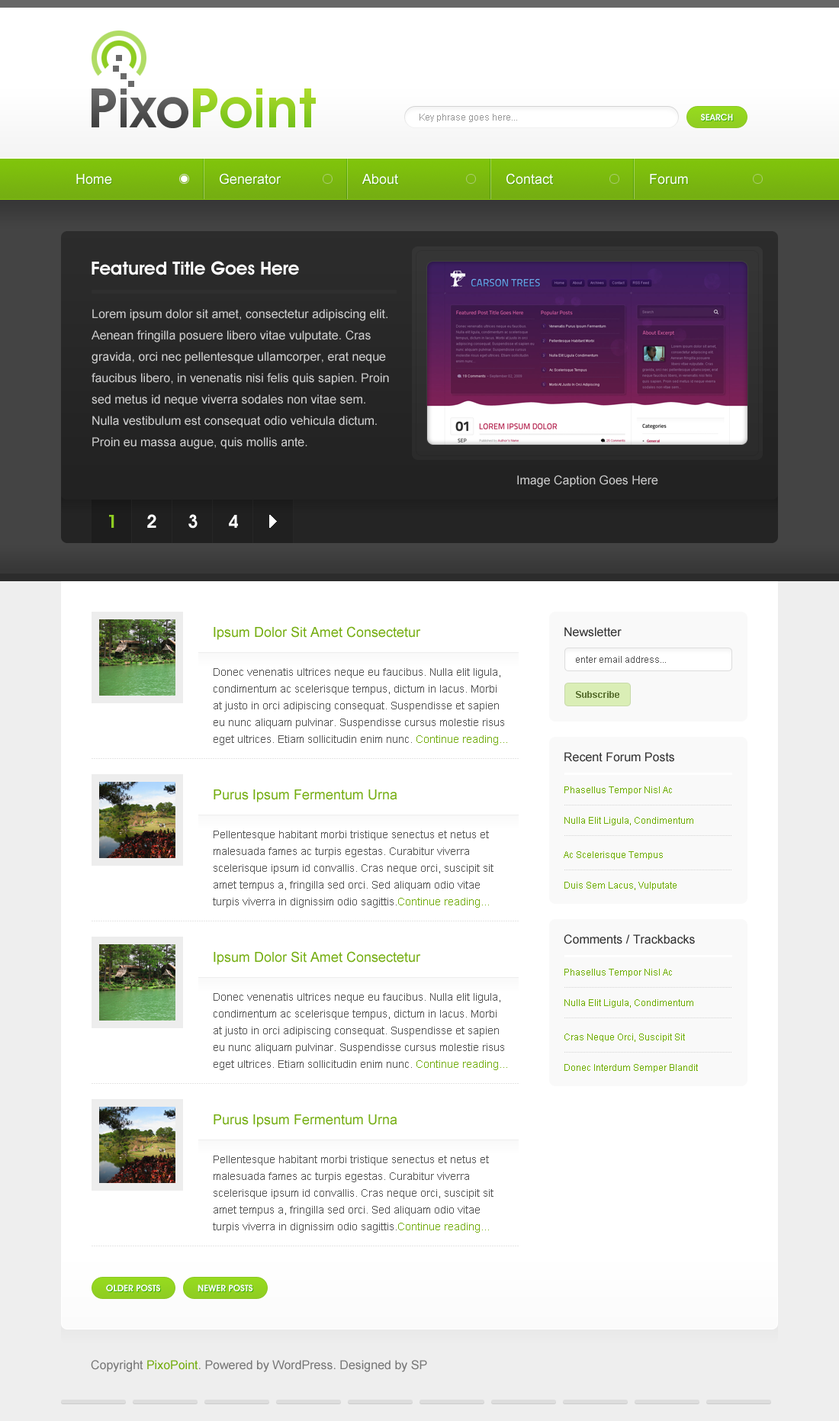
<style>
.page{position:relative;width:839px;height:1421px;background:#ffffff}
.page>*{position:absolute;margin:0}
.t1{font:9.2px "ArialMT";color:#999999}
.t2{font:9.2px "AvantGardeITCbyBT-Demi";color:#f9f9f9;text-transform:uppercase}
.t3{font:13.7px "ArialMT";color:#ffffff}
.t4{font:18.3px "AvantGardeITCbyBT-Demi";color:#ffffff}
.t5{font:12.2px/21.4px "ArialMT";color:#cccccc}
.t6{font:12.2px "ArialMT";color:#cccccc}
.t7{font:18.3px "AvantGardeITCbyBT-Demi";color:#8fcd22}
.t8{font:13.7px "ArialMT";color:#74ad10}
.t9{font:12.2px "ArialMT";color:#333333}
.t10{font:9.2px "ArialMT";color:#555555}
.t11{font:10.7px/16.8px "ArialMT";color:#555555}
.t12{font:10.7px/16.8px "ArialMT";color:#74ad10}
.t13{font:9.2px "Arial-BoldMT";color:#627939}
.t14{font:9.2px "ArialMT";color:#6ead00}
.t15{font:12.2px "ArialMT";color:#777777}
.t16{font:12.2px "ArialMT";color:#74ad10}
</style>
<div class="page">
<p class="t1" style="left:420px;top:114px;width:97px;height:8px">Key phrase goes here...</p>
<p class="t2" style="left:701px;top:114px;width:32px;height:7px">Search</p>
<p class="t3" style="left:76px;top:174px;width:36px;height:11px">Home</p>
<p class="t3" style="left:220px;top:173px;width:61px;height:12px">Generator</p>
<p class="t3" style="left:362px;top:174px;width:36px;height:11px">About</p>
<p class="t3" style="left:507px;top:173px;width:46px;height:12px">Contact</p>
<p class="t3" style="left:650px;top:174px;width:38px;height:11px">Forum</p>
<p class="t4" style="left:92px;top:261px;width:207px;height:14px">Featured Title Goes Here</p>
<p class="t5" style="left:92px;top:309px;width:297px;height:140px">Lorem ipsum dolor sit amet, consectetur adipiscing elit.<br>Aenean fringilla posuere libero vitae vulputate. Cras<br>gravida, orci nec pellentesque ullamcorper, erat neque<br>faucibus libero, in venenatis nisi felis quis sapien. Proin<br>sed metus id neque viverra sodales non vitae sem.<br>Nulla vestibulum est consequat odio vehicula dictum.<br>Proin eu massa augue, quis mollis ante.</p>
<p class="t6" style="left:517px;top:475px;width:141px;height:12px">Image Caption Goes Here</p>
<p class="t7" style="left:109px;top:515px;width:5px;height:13px">1</p>
<p class="t4" style="left:147px;top:514px;width:9px;height:14px">2</p>
<p class="t4" style="left:188px;top:514px;width:10px;height:15px">3</p>
<p class="t4" style="left:229px;top:515px;width:9px;height:13px">4</p>
<p class="t8" style="left:214px;top:626px;width:207px;height:14px">Ipsum Dolor Sit Amet Consectetur</p>
<p class="t9" style="left:564px;top:627px;width:58px;height:10px">Newsletter</p>
<p class="t10" style="left:576px;top:656px;width:90px;height:7px">enter email address...</p>
<p class="t11" style="left:214px;top:668px;width:293px;height:77px">Donec venenatis ultrices neque eu faucibus. Nulla elit ligula,<br>condimentum ac scelerisque tempus, dictum in lacus. Morbi<br>at justo in orci adipiscing consequat. Suspendisse et sapien<br>eu nunc aliquam pulvinar. Suspendisse cursus molestie risus<br>eget ultrices. Etiam sollicitudin enim nunc. <span class="t12">Continue reading...</span></p>
<p class="t13" style="left:576px;top:691px;width:43px;height:7px">Subscribe</p>
<p class="t9" style="left:564px;top:752px;width:110px;height:10px">Recent Forum Posts</p>
<p class="t8" style="left:214px;top:790px;width:183px;height:12px">Purus Ipsum Fermentum Urna</p>
<p class="t14" style="left:564px;top:786px;width:108px;height:9px">Phasellus Tempor Nisl Ac</p>
<p class="t14" style="left:564px;top:817px;width:129px;height:8px">Nulla Elit Ligula, Condimentum</p>
<p class="t11" style="left:213px;top:831px;width:281px;height:77px">Pellentesque habitant morbi tristique senectus et netus et<br>malesuada fames ac turpis egestas. Curabitur viverra<br>scelerisque ipsum id convallis. Cras neque orci, suscipit sit<br>amet tempus a, fringilla sed orci. Sed aliquam odio vitae<br>turpis viverra in dignissim odio sagittis.<span class="t12">Continue reading...</span></p>
<p class="t14" style="left:564px;top:851px;width:99px;height:9px">Ac Scelerisque Tempus</p>
<p class="t14" style="left:564px;top:882px;width:113px;height:8px">Duis Sem Lacus, Vulputate</p>
<p class="t9" style="left:564px;top:934px;width:131px;height:10px">Comments / Trackbacks</p>
<p class="t8" style="left:214px;top:951px;width:207px;height:14px">Ipsum Dolor Sit Amet Consectetur</p>
<p class="t14" style="left:564px;top:969px;width:108px;height:8px">Phasellus Tempor Nisl Ac</p>
<p class="t11" style="left:214px;top:993px;width:293px;height:77px">Donec venenatis ultrices neque eu faucibus. Nulla elit ligula,<br>condimentum ac scelerisque tempus, dictum in lacus. Morbi<br>at justo in orci adipiscing consequat. Suspendisse et sapien<br>eu nunc aliquam pulvinar. Suspendisse cursus molestie risus<br>eget ultrices. Etiam sollicitudin enim nunc. <span class="t12">Continue reading...</span></p>
<p class="t14" style="left:564px;top:999px;width:129px;height:9px">Nulla Elit Ligula, Condimentum</p>
<p class="t14" style="left:564px;top:1034px;width:121px;height:8px">Cras Neque Orci, Suscipit Sit</p>
<p class="t14" style="left:564px;top:1064px;width:134px;height:9px">Donec Interdum Semper Blandit</p>
<p class="t8" style="left:214px;top:1114px;width:183px;height:13px">Purus Ipsum Fermentum Urna</p>
<p class="t11" style="left:213px;top:1156px;width:281px;height:77px">Pellentesque habitant morbi tristique senectus et netus et<br>malesuada fames ac turpis egestas. Curabitur viverra<br>scelerisque ipsum id convallis. Cras neque orci, suscipit sit<br>amet tempus a, fringilla sed orci. Sed aliquam odio vitae<br>turpis viverra in dignissim odio sagittis.<span class="t12">Continue reading...</span></p>
<p class="t2" style="left:106px;top:1285px;width:54px;height:6px">Older Posts</p>
<p class="t2" style="left:198px;top:1285px;width:55px;height:6px">Newer Posts</p>
<p class="t15" style="left:91px;top:1360px;width:336px;height:12px">Copyright <span class="t16">PixoPoint</span>. Powered by WordPress. Designed by SP</p>
</div>
